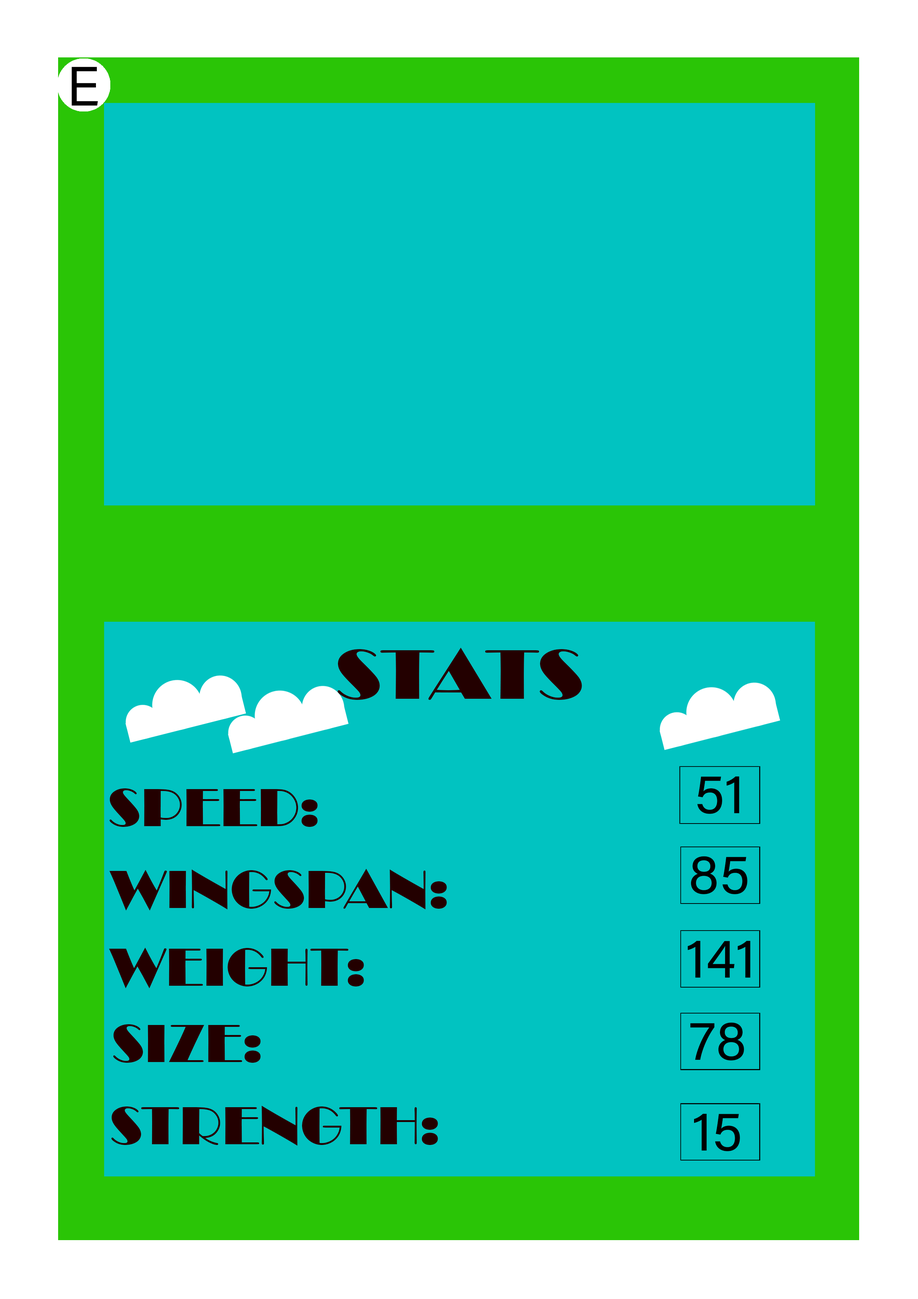
<style>
.page{position:relative;width:918px;height:1299px;background:#01c3c1}
.page>*{position:absolute;margin:0}
.t1{font:55.5px "AcuminConcept-Regular";color:#000000}
.t2{font:72.4px "Broadway";color:#230000;scale:1.09 1}
.t3{font:55.5px "Broadway";color:#230000}
</style>
<div class="page">
<p class="t1" style="left:71px;top:67px;width:27px;height:39px">E</p>
<p class="t2" style="left:338px;top:648px;width:244px;height:52px">STATS</p>
<p class="t1" style="left:697px;top:776px;width:42px;height:38px">51</p>
<p class="t3" style="left:110px;top:788px;width:208px;height:39px">SPEED:</p>
<p class="t1" style="left:691px;top:856px;width:56px;height:38px">85</p>
<p class="t3" style="left:109px;top:869px;width:338px;height:41px">WINGSPAN:</p>
<p class="t1" style="left:688px;top:940px;width:62px;height:37px">141</p>
<p class="t3" style="left:109px;top:947px;width:255px;height:41px">WEIGHT:</p>
<p class="t3" style="left:113px;top:1024px;width:148px;height:39px">SIZE:</p>
<p class="t1" style="left:690px;top:1022px;width:54px;height:38px">78</p>
<p class="t3" style="left:111px;top:1105px;width:327px;height:40px">STRENGTH:</p>
<p class="t1" style="left:694px;top:1113px;width:46px;height:38px">15</p>
</div>
